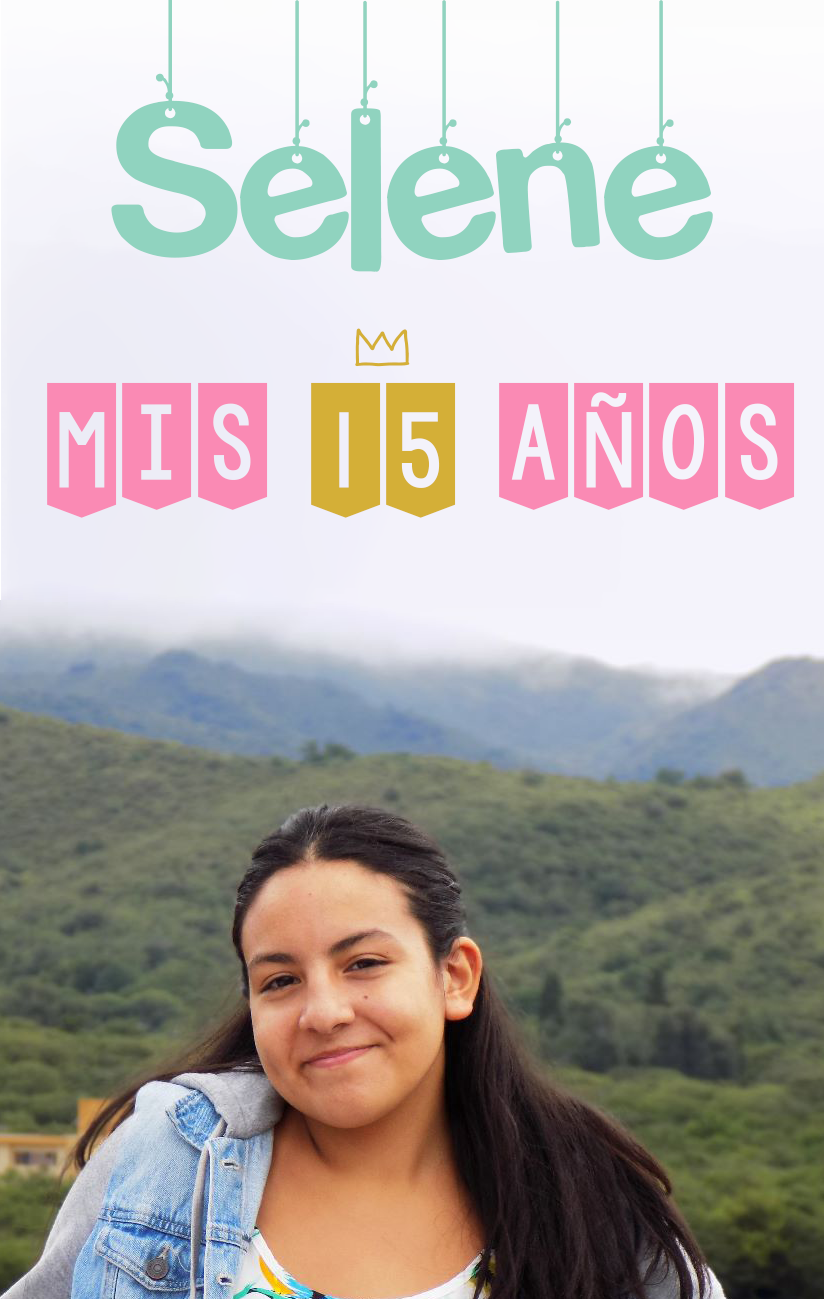
<style>
.page{position:relative;width:824px;height:1299px}
.page>*{position:absolute;margin:0}
.t1{font:240px "HangingLetters";color:#90d3bf}
.t2{font:160px "KGChasingCars";color:#fa8ab4}
.t3{font:160px "KGChasingCars";color:#d4af37}
</style>
<div class="page">
<p class="t1" style="left:111px;top:0px;width:602px;height:272px">Selene</p>
<p class="t2" style="left:47px;top:382px;width:748px;height:136px">Mis <span class="t3">15</span> años</p>
</div>
